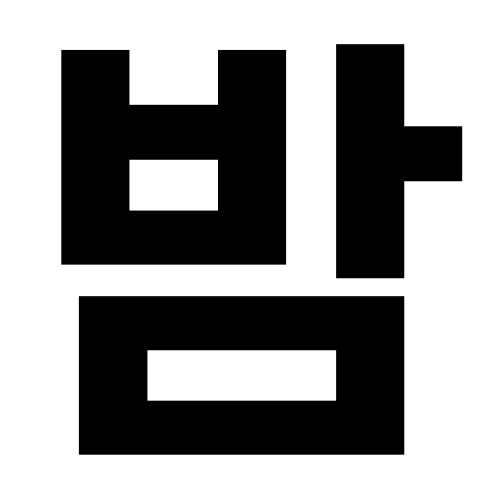
<style>
.page{position:relative;width:500px;height:500px;background:#ffffff}
.page>*{position:absolute;margin:0}
.t1{font:439px "TTOmniGothicH";color:#000000}
</style>
<div class="page">
<p class="t1" style="left:61px;top:44px;width:402px;height:411px">밤</p>
</div>
